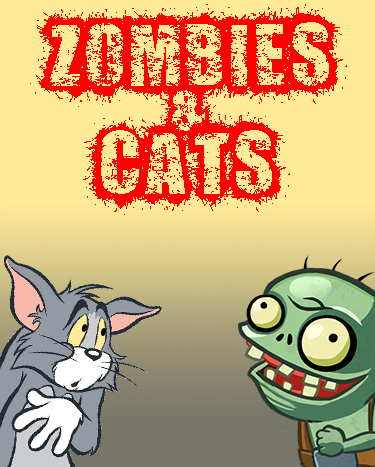
<style>
.page{position:relative;width:375px;height:467px;background:#ffea97}
.page>*{position:absolute;margin:0}
.t1{font:90px "ZOMBIFIED";color:#ff0000}
</style>
<div class="page">
<p class="t1" style="left:30px;top:4px;width:317px;height:103px">ZOMBIES</p>
<p class="t1" style="left:160px;top:76px;width:56px;height:65px">&amp;</p>
<p class="t1" style="left:83px;top:112px;width:207px;height:103px">CATS</p>
</div>
